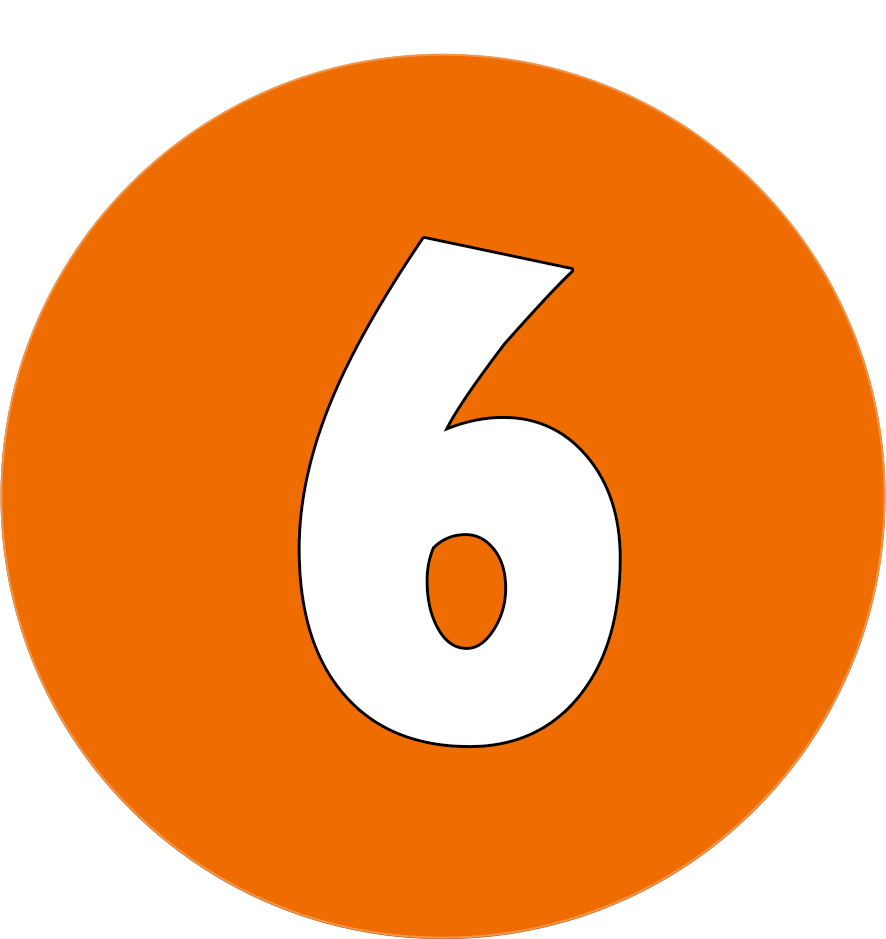
<style>
.page{position:relative;width:886px;height:939px;background:#ef6c00}
.page>*{position:absolute;margin:0}
.t1{font:637.2px "ShowcardGothic-Reg";color:#ffffff}
</style>
<div class="page">
<p class="t1" style="left:300px;top:239px;width:319px;height:507px">6</p>
</div>
